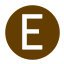
<style>
.page{position:relative;width:64px;height:64px;background:#ffffff}
.page>*{position:absolute;margin:0}
.t1{font:52px "Gidole-Regular";color:#ffffff;font-weight:bold}
</style>
<div class="page">
<p class="t1" style="left:22px;top:14px;width:21px;height:36px">E</p>
</div>
